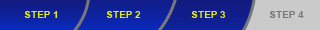
<style>
.page{position:relative;width:320px;height:30px}
.page>*{position:absolute;margin:0}
.t1{font:10px "Arial-BoldMT";color:#e2e91a}
.t2{font:10px "Arial-BoldMT";color:#797979}
</style>
<div class="page">
<p class="t1" style="left:24px;top:11px;width:34px;height:7px">STEP 1</p>
<p class="t1" style="left:106px;top:11px;width:35px;height:7px">STEP 2</p>
<p class="t1" style="left:191px;top:11px;width:35px;height:7px">STEP 3</p>
<p class="t2" style="left:269px;top:11px;width:35px;height:7px">STEP 4</p>
</div>
